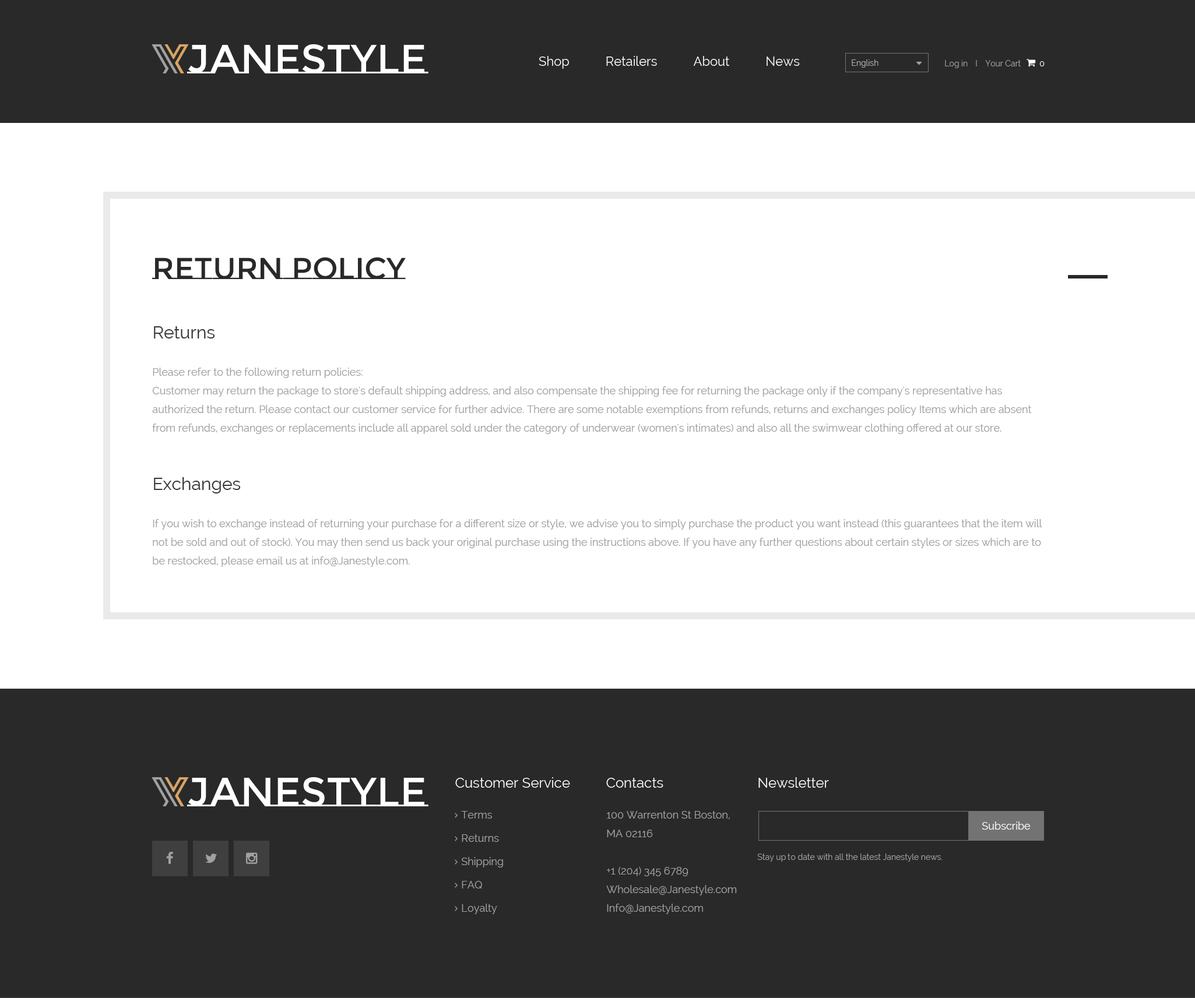
<style>
.page{position:relative;width:1195px;height:998px;background:#ffffff}
.page>*{position:absolute;margin:0}
.t1{font:40.8px "MontserratSubrayada-Regular";color:#ffffff}
.t2{font:12.8px "Raleway";color:#ffffff}
.t3{font:8.2px "Raleway";color:#b3b3b3}
.t4{font:8.2px "Raleway";color:#a1a1a1}
.t5{font:8.2px "Raleway";color:#ffffff}
.t6{font:30.3px "MontserratSubrayada-Regular";color:#292929}
.t7{font:10.5px/18.6px "Raleway";color:#a1a1a1}
.t8{font:17.5px/18.6px "Raleway";color:#373737}
.t9{font:14px "Raleway";color:#ffffff}
.t10{font:10.5px/23.3px "Raleway";color:#a1a1a1}
.t11{font:10.5px "Raleway";color:#fffefe}
</style>
<div class="page">
<p class="t1" style="left:187px;top:44px;width:241px;height:29px">Janestyle</p>
<p class="t2" style="left:538px;top:56px;width:261px;height:13px">Shop           Retailers           About           News</p>
<p class="t3" style="left:851px;top:59px;width:27px;height:9px">English</p>
<p class="t4" style="left:945px;top:60px;width:22px;height:8px">Log in</p>
<p class="t4" style="left:985px;top:60px;width:36px;height:6px">Your Cart</p>
<p class="t5" style="left:1039px;top:61px;width:5px;height:5px">0</p>
<p class="t6" style="left:152px;top:257px;width:254px;height:22px">Return policy</p>
<p class="t7" style="left:152px;top:326px;width:879px;height:108px"><span class="t8">Returns<br></span><br>Please refer to the following return policies:<br>Customer may return the package to store's default shipping address, and also compensate the shipping fee for returning the package only if the company's representative has authorized the return. Please contact our customer service for further advice. There are some notable exemptions from refunds, returns and exchanges policy Items which are absent from refunds, exchanges or replacements include all apparel sold under the category of underwear (women's intimates) and also all the swimwear clothing offered at our store.</p>
<p class="t7" style="left:153px;top:477px;width:889px;height:90px"><span class="t8">Exchanges<br></span><br>If you wish to exchange instead of returning your purchase for a different size or style, we advise you to simply purchase the product you want instead (this guarantees that the item will not be sold and out of stock). You may then send us back your original purchase using the instructions above. If you have any further questions about certain styles or sizes which are to be restocked, please email us at info@Janestyle.com.</p>
<p class="t1" style="left:187px;top:777px;width:241px;height:29px">Janestyle</p>
<p class="t9" style="left:455px;top:777px;width:115px;height:11px">Customer Service</p>
<p class="t9" style="left:606px;top:778px;width:57px;height:10px">Contacts</p>
<p class="t9" style="left:758px;top:777px;width:71px;height:11px">Newsletter</p>
<p class="t10" style="left:461px;top:811px;width:42px;height:103px">Terms<br>Returns<br>Shipping<br>FAQ<br>Loyalty</p>
<p class="t7" style="left:606px;top:811px;width:131px;height:103px">100 Warrenton St Boston, <br>MA 02116<br><br>+1 (204) 345 6789<br>Wholesale@Janestyle.com<br>Info@Janestyle.com</p>
<p class="t11" style="left:981px;top:822px;width:49px;height:8px">Subscribe</p>
<p class="t4" style="left:757px;top:854px;width:185px;height:8px">Stay up to date with all the latest Janestyle news.</p>
</div>
